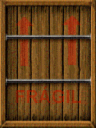
<style>
.page{position:relative;width:96px;height:128px}
.page>*{position:absolute;margin:0}
.t1{font:18px "Arial-BoldMT";text-transform:uppercase}
</style>
<div class="page">
<p class="t1" style="left:15px;top:86px;width:66px;height:18px">FRÁGIL</p>
</div>
